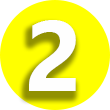
<style>
.page{position:relative;width:110px;height:110px;background:#ffff00}
.page>*{position:absolute;margin:0}
.t1{font:100px "NirmalaUI-Bold";color:#fefefe}
</style>
<div class="page">
<p class="t1" style="left:29px;top:20px;width:47px;height:71px">2</p>
</div>
